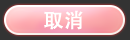
<style>
.page{position:relative;width:130px;height:40px;background:#333333}
.page>*{position:absolute;margin:0}
.t1{font:20px "AdobeHeitiStd-Regular";color:#ffffff;font-weight:bold}
</style>
<div class="page">
<p class="t1" style="left:44px;top:10px;width:39px;height:20px">取消</p>
</div>
